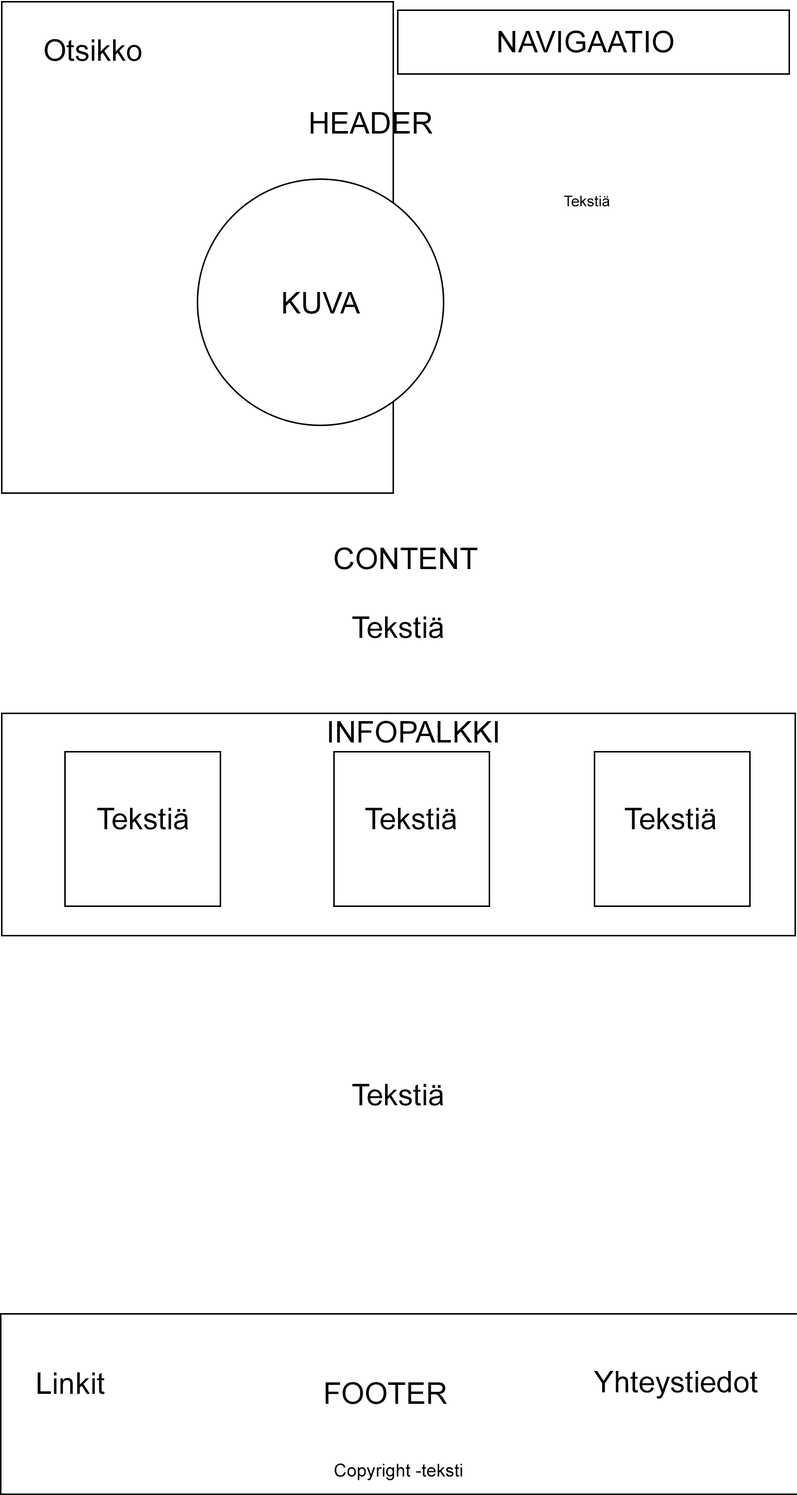
<style>
.page{position:relative;width:797px;height:1495px;background:#ffffff}
.page>*{position:absolute;margin:0}
.t1{font:29.9px "ArialMT";color:#000000}
.t2{font:15px "ArialMT";color:#000000}
.t3{font:17.9px "ArialMT";color:#000000}
</style>
<div class="page">
<p class="t1" style="left:44px;top:39px;width:98px;height:22px">Otsikko</p>
<p class="t1" style="left:498px;top:30px;width:176px;height:23px">NAVIGAATIO</p>
<p class="t1" style="left:311px;top:112px;width:122px;height:22px">HEADER</p>
<p class="t2" style="left:564px;top:195px;width:46px;height:12px">Tekstiä</p>
<p class="t1" style="left:283px;top:292px;width:77px;height:22px">KUVA</p>
<p class="t1" style="left:334px;top:547px;width:144px;height:23px">CONTENT</p>
<p class="t1" style="left:352px;top:617px;width:92px;height:21px">Tekstiä</p>
<p class="t1" style="left:329px;top:721px;width:169px;height:22px">INFOPALKKI</p>
<p class="t1" style="left:97px;top:808px;width:91px;height:22px">Tekstiä</p>
<p class="t1" style="left:365px;top:808px;width:92px;height:22px">Tekstiä</p>
<p class="t1" style="left:625px;top:808px;width:91px;height:22px">Tekstiä</p>
<p class="t1" style="left:352px;top:1084px;width:92px;height:22px">Tekstiä</p>
<p class="t1" style="left:37px;top:1373px;width:68px;height:22px">Linkit</p>
<p class="t1" style="left:594px;top:1371px;width:164px;height:28px">Yhteystiedot</p>
<p class="t1" style="left:325px;top:1382px;width:122px;height:23px">FOOTER</p>
<p class="t3" style="left:334px;top:1463px;width:129px;height:18px">Copyright -teksti</p>
</div>
